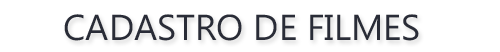
<style>
.page{position:relative;width:500px;height:52px;background:#ffffff}
.page>*{position:absolute;margin:0}
.t1{font:36px "MicrosoftPhagsPa";color:#292c37}
</style>
<div class="page">
<p class="t1" style="left:64px;top:14px;width:355px;height:27px">CADASTRO DE FILMES</p>
</div>
